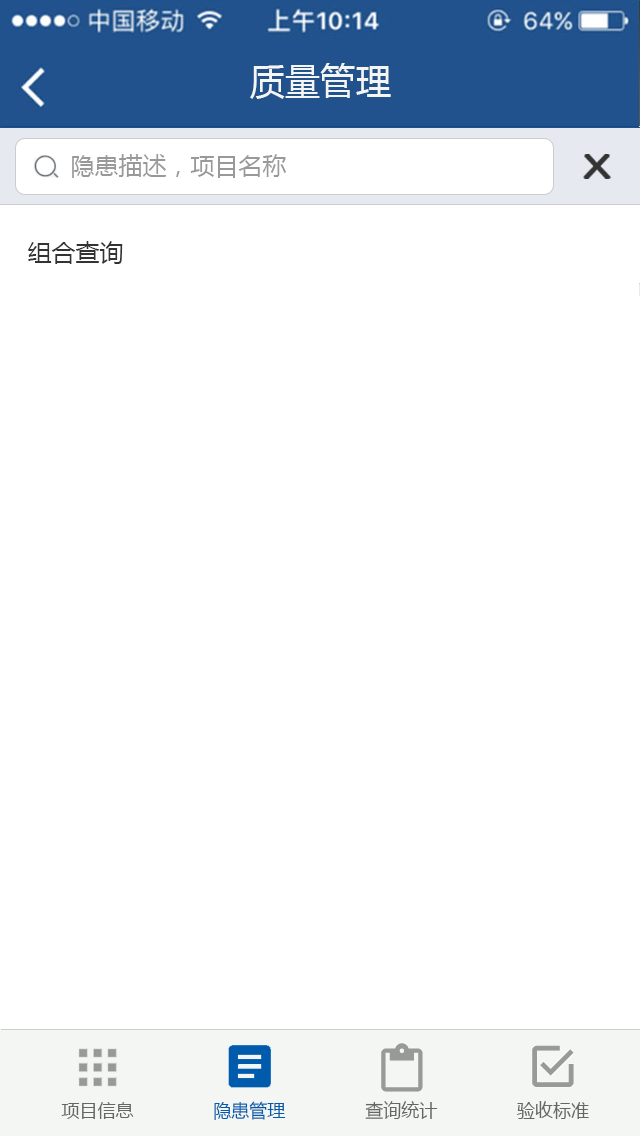
<style>
.page{position:relative;width:640px;height:1136px;background:#ffffff}
.page>*{position:absolute;margin:0}
.t1{font:36px "MicrosoftYaHei";color:#f3f6f3}
.t2{font:24px "MicrosoftYaHei";color:#999999}
.t3{font:24px "MicrosoftYaHei";color:#333333}
.t4{font:18px "MicrosoftYaHei";color:#666666}
.t5{font:18px "MicrosoftYaHei";color:#005bac}
</style>
<div class="page">
<p class="t1" style="left:250px;top:63px;width:141px;height:36px">质量管理</p>
<p class="t2" style="left:72px;top:154px;width:214px;height:24px">隐患描述，项目名称</p>
<p class="t3" style="left:28px;top:241px;width:95px;height:23px">组合查询</p>
<p class="t4" style="left:61px;top:1101px;width:528px;height:19px">项目信息               <span class="t5">隐患管理</span>               查询统计               验收标准</p>
</div>
